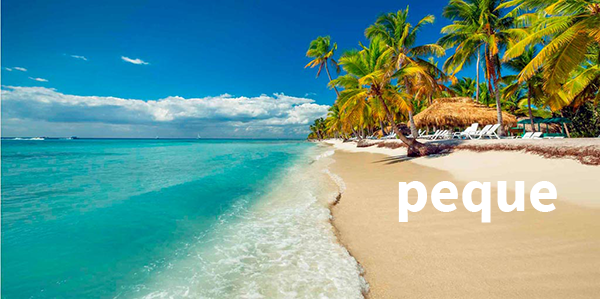
<style>
.page{position:relative;width:600px;height:299px}
.page>*{position:absolute;margin:0}
.t1{font:60px "SourceSansPro-Bold";color:#ffffff}
</style>
<div class="page">
<p class="t1" style="left:398px;top:181px;width:159px;height:42px">peque</p>
</div>
